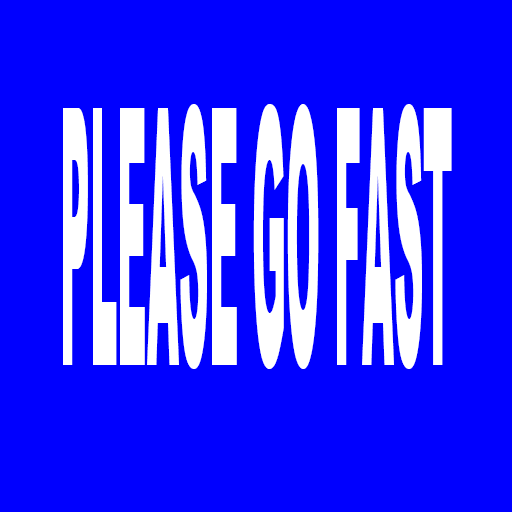
<style>
.page{position:relative;width:512px;height:512px;background:#0000ff}
.page>*{position:absolute;margin:0}
.t1{font:358.9px "Arial-Black";color:#ffffff;scale:0.11 1}
</style>
<div class="page">
<p class="t1" style="left:63px;top:104px;width:389px;height:265px">PLEASE GO FAST</p>
</div>
